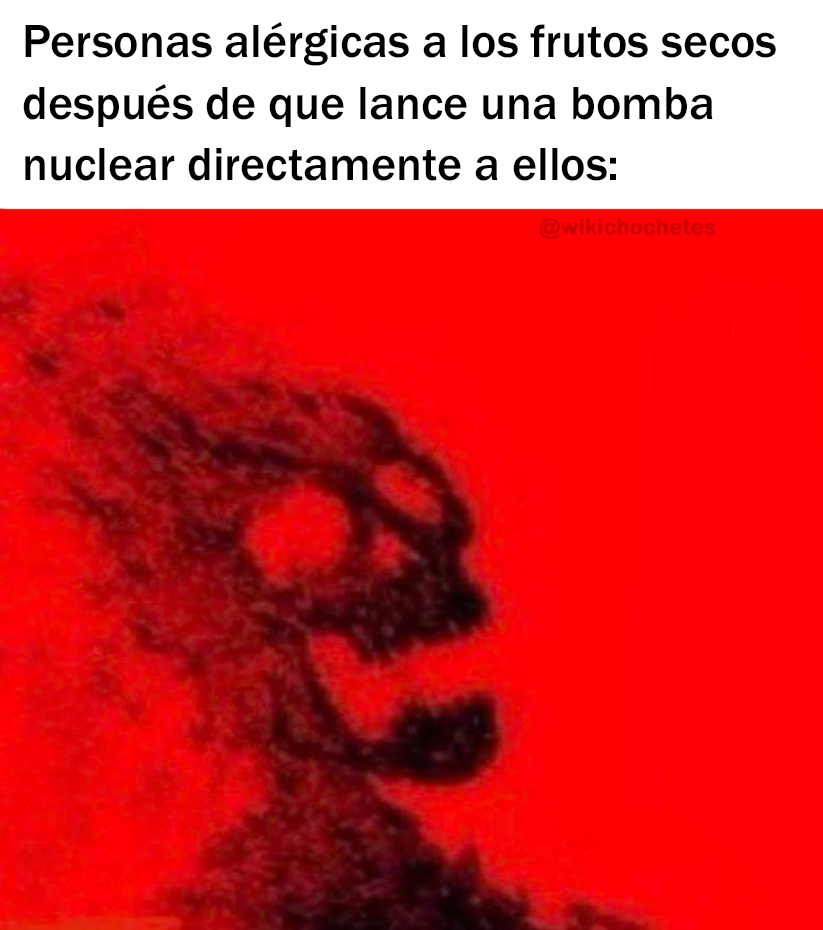
<style>
.page{position:relative;width:823px;height:930px}
.page>*{position:absolute;margin:0}
.t1{font:47.9px "FranklinGothic-Medium";color:#000000}
.t2{font:21.3px "ArialRoundedMTBold";color:#cb0102;font-weight:bold}
</style>
<div class="page">
<p class="t1" style="left:23px;top:22px;width:753px;height:159px">Personas alérgicas a los frutos secos<br>después de que lance una bomba<br>nuclear directamente a ellos:</p>
<p class="t2" style="left:539px;top:218px;width:176px;height:21px">@wikichochetes</p>
</div>
